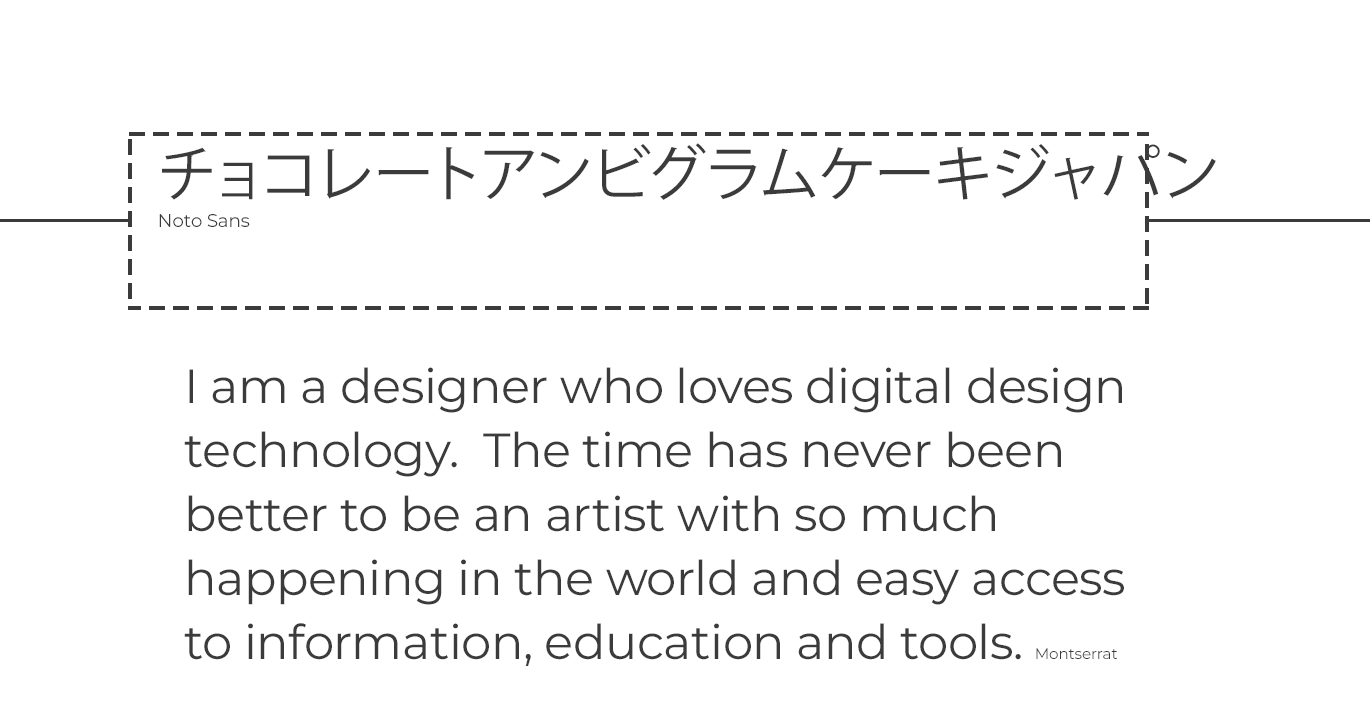
<style>
.page{position:relative;width:1370px;height:712px;background:#ffffff}
.page>*{position:absolute;margin:0}
.t1{font:60px/36px "KozGoPr6N-Regular";color:#3b3b3b}
.t2{font:60px/36px "MyriadPro-Regular";color:#3b3b3b}
.t3{font:18.4px/31.2px "Montserrat-Regular";letter-spacing:-0.01em;color:#3b3b3b}
.t4{font:48px/64px "Montserrat-Regular";letter-spacing:-0.01em;color:#3b3b3b}
.t5{font:48px/64px "Montserrat-Regular";letter-spacing:-0.01em;color:#3b3b3b;text-transform:uppercase}
.t6{font:15.2px/64px "Montserrat-Regular";letter-spacing:-0.01em;color:#3b3b3b}
</style>
<div class="page">
<p class="t1" style="left:159px;top:143px;width:1057px;height:84px"><span class="t2"><br></span>チョコレートアンビグラムケーキジャパン <br><span class="t3">Noto Sans</span></p>
<p class="t4" style="left:184px;top:367px;width:940px;height:299px"><span class="t5">I </span>am a designer who loves digital design technology.  The time has never been better to be an artist with so much happening in the world and easy access to information, education and tools. <span class="t6">Montserrat</span></p>
</div>
